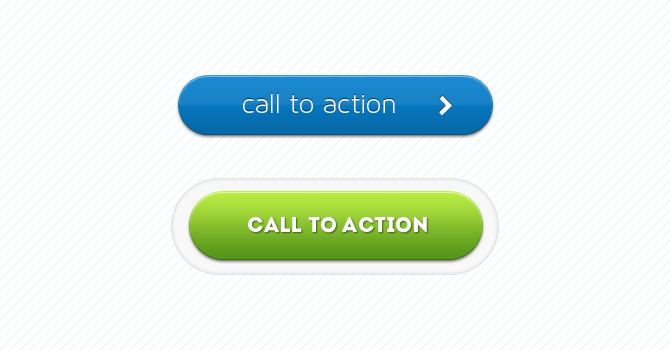
<style>
.page{position:relative;width:670px;height:350px;background:#ffffff}
.page>*{position:absolute;margin:0}
.t1{font:28px "MavenProLight300-Regular";color:#ffffff}
.t2{font:21px "Intro";color:#ffffff}
</style>
<div class="page">
<p class="t1" style="left:243px;top:93px;width:152px;height:20px">call to action</p>
<p class="t2" style="left:248px;top:217px;width:179px;height:16px">call to action</p>
</div>
